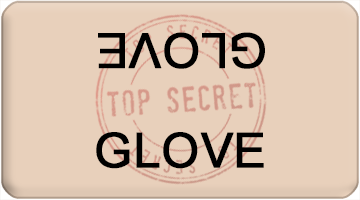
<style>
.page{position:relative;width:360px;height:200px;background:#e8d0bb}
.page>*{position:absolute;margin:0}
.t1{font:48px "ArialMT";color:#000000;font-weight:bold}
</style>
<div class="page">
<p class="t1" style="left:98px;top:32px;width:167px;height:37px;rotate:180deg">GLOVE</p>
<p class="t1" style="left:96px;top:132px;width:168px;height:37px">GLOVE</p>
</div>
